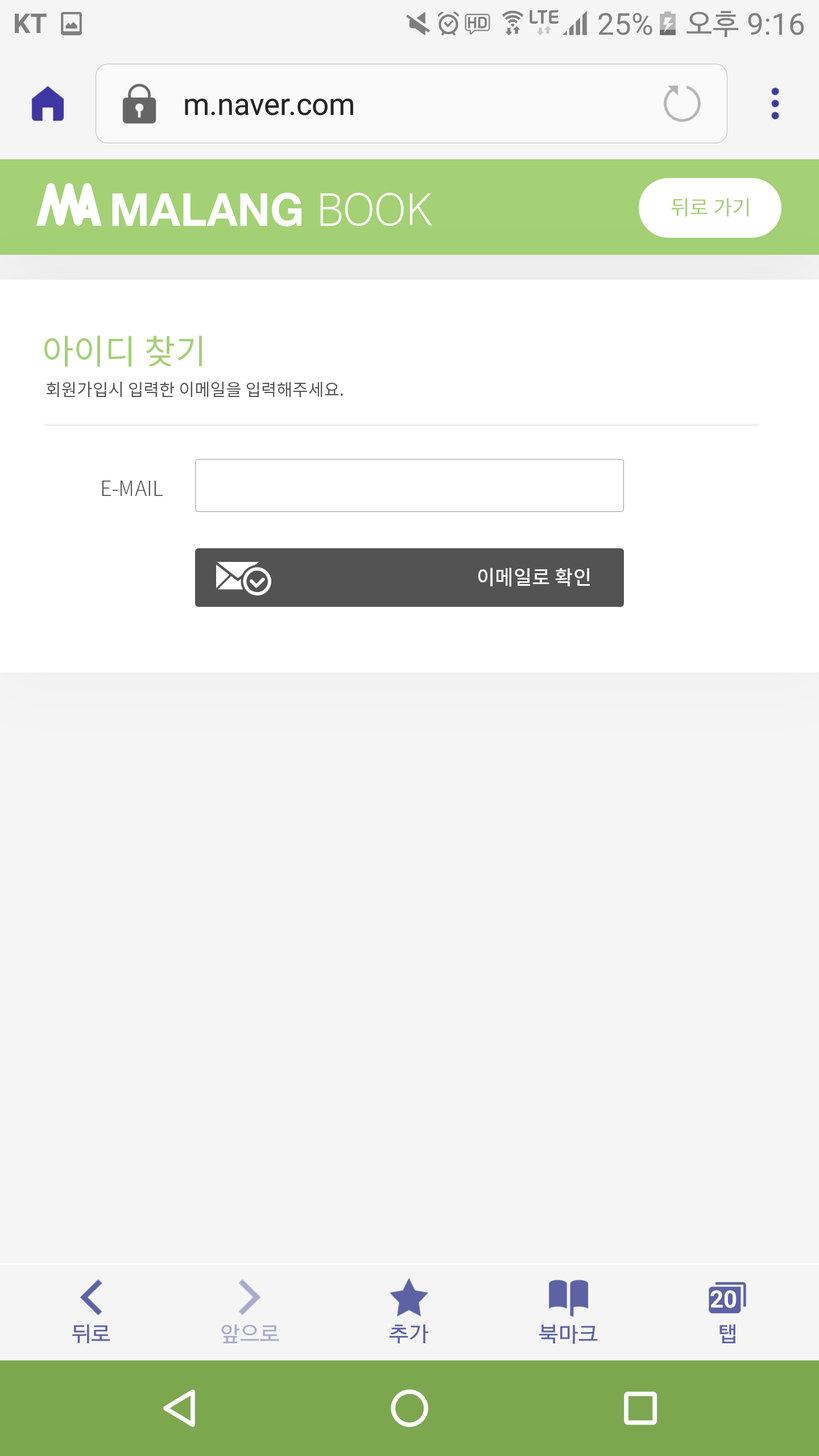
<style>
.page{position:relative;width:819px;height:1456px;background:#f5f5f5}
.page>*{position:absolute;margin:0}
.t1{font:20.5px "NotoSansCJKkr-Regular";color:#a4d175}
.t2{font:34.1px "NotoSansCJKkr-Regular";color:#a4d175}
.t3{font:17.1px "NotoSansCJKkr-Regular";color:#535353}
.t4{font:20.5px "NotoSansCJKkr-Light";color:#535353}
.t5{font:19.9px "NotoSansCJKkr-Medium";color:#ffffff}
</style>
<div class="page">
<p class="t1" style="left:672px;top:198px;width:76px;height:19px">뒤로 가기</p>
<p class="t2" style="left:44px;top:336px;width:158px;height:31px">아이디 찾기</p>
<p class="t3" style="left:46px;top:382px;width:297px;height:16px">회원가입시 입력한 이메일을 입력해주세요.</p>
<p class="t4" style="left:102px;top:481px;width:61px;height:15px">E-MAIL</p>
<p class="t5" style="left:478px;top:568px;width:112px;height:19px">이메일로 확인</p>
</div>
